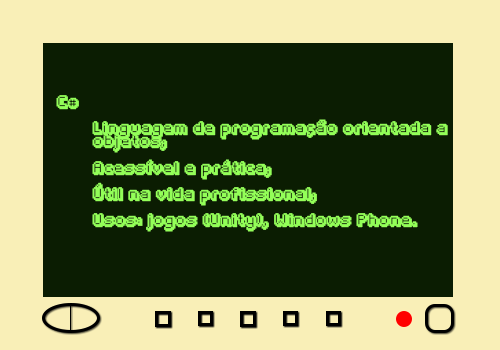
<style>
.page{position:relative;width:500px;height:350px;background:#0b1d02}
.page>*{position:absolute;margin:0}
.t1{font:11px "fipps";color:#93ff58}
</style>
<div class="page">
<p class="t1" style="left:56px;top:95px;width:392px;height:137px">C#<br> <br> Linguagem de programação orientada a<br> objetos;<br><br> Acessível e prática;<br><br> Útil na vida profissional;<br><br> Usos: jogos (Unity), Windows Phone.</p>
</div>
